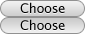
<style>
.page{position:relative;width:85px;height:34px}
.page>*{position:absolute;margin:0}
.t1{font:13px "LucidaGrande";letter-spacing:-0.025em;color:#000000}
</style>
<div class="page">
<p class="t1" style="left:20px;top:2px;width:45px;height:11px">Choose</p>
<p class="t1" style="left:20px;top:19px;width:45px;height:11px">Choose</p>
</div>
